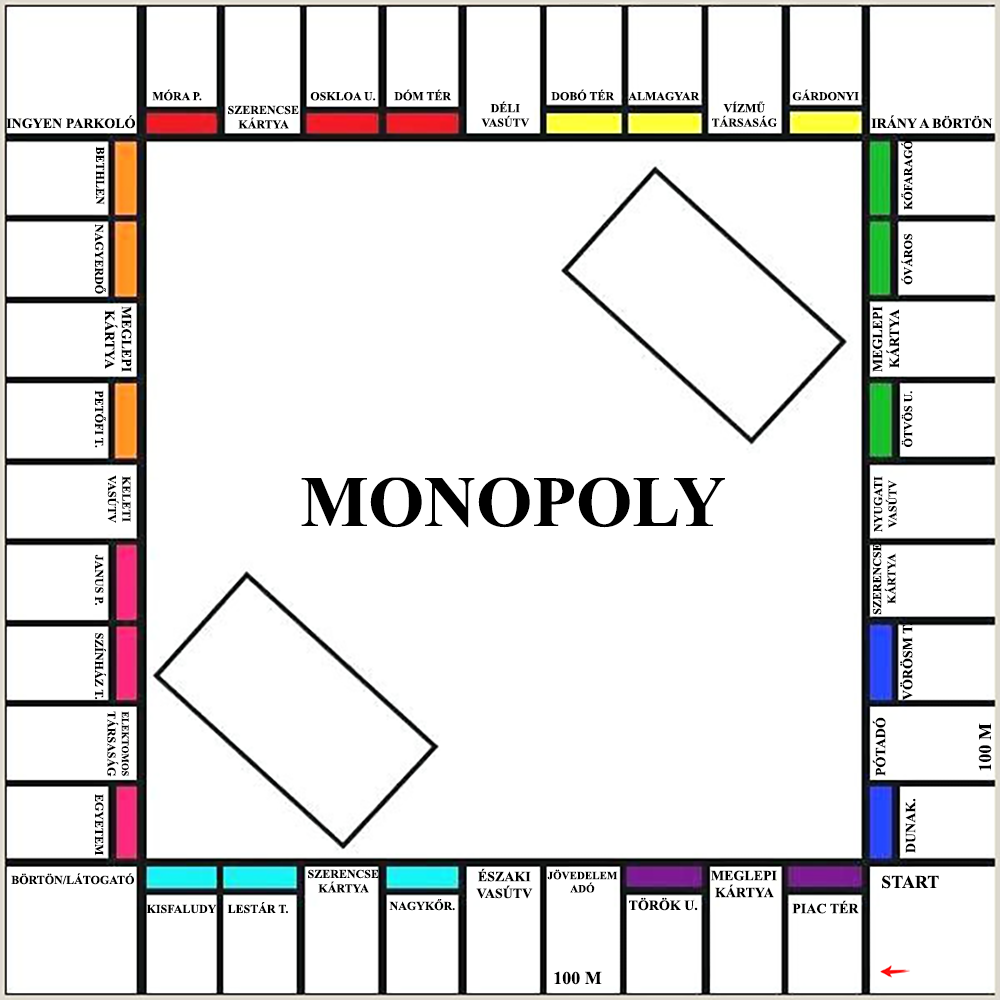
<style>
.page{position:relative;width:1000px;height:1000px;background:#ffffff}
.page>*{position:absolute;margin:0}
.t1{font:12px "TimesNewRomanPS-BoldMT";color:#000000}
.t2{font:14px "TimesNewRomanPS-BoldMT";color:#000000}
.t3{font:72px "TimesNewRomanPS-BoldMT";color:#000000}
.t4{font:10px "TimesNewRomanPS-BoldMT";color:#000000}
.t5{font:18px "TimesNewRomanPS-BoldMT";color:#000000}
.t6{font:11px "TimesNewRomanPS-BoldMT";color:#000000}
</style>
<div class="page">
<p class="t1" style="left:152px;top:89px;width:50px;height:12px">MÓRA P.</p>
<p class="t1" style="left:394px;top:89px;width:58px;height:12px">DÓM TÉR</p>
<p class="t1" style="left:551px;top:89px;width:64px;height:12px">DOBÓ TÉR</p>
<p class="t1" style="left:792px;top:89px;width:67px;height:12px">GÁRDONYI</p>
<p class="t1" style="left:310px;top:92px;width:66px;height:9px">OSKLOA U.</p>
<p class="t1" style="left:481px;top:101px;width:49px;height:26px;text-align:center">DÉLI<br>VASÚTV</p>
<p class="t1" style="left:628px;top:92px;width:72px;height:9px">ALMAGYAR</p>
<p class="t1" style="left:712px;top:101px;width:65px;height:26px;text-align:center">VÍZMŰ<br>TÁRSASÁG</p>
<p class="t1" style="left:228px;top:105px;width:71px;height:24px;text-align:center">SZERENCSE<br>KÁRTYA</p>
<p class="t2" style="left:6px;top:115px;width:129px;height:14px">INGYEN PARKOLÓ</p>
<p class="t2" style="left:871px;top:115px;width:122px;height:14px">IRÁNY A BÖRTÖN</p>
<p class="t1" style="left:96px;top:146px;width:9px;height:59px;rotate:90deg">BETHLEN</p>
<p class="t1" style="left:901px;top:140px;width:12px;height:70px;rotate:-90deg">KŐFARAGÓ</p>
<p class="t1" style="left:95px;top:224px;width:11px;height:70px;rotate:90deg">NAGYERDŐ</p>
<p class="t1" style="left:901px;top:233px;width:12px;height:52px;rotate:-90deg">ÓVÁROS</p>
<p class="t2" style="left:105px;top:306px;width:27px;height:66px;text-align:center;rotate:90deg">MEGLEPI<br>KÁRTYA</p>
<p class="t2" style="left:872px;top:306px;width:27px;height:66px;text-align:center;rotate:-90deg">MEGLEPI<br>KÁRTYA</p>
<p class="t1" style="left:95px;top:390px;width:11px;height:58px;rotate:90deg">PETŐFI T.</p>
<p class="t1" style="left:901px;top:391px;width:12px;height:56px;rotate:-90deg">ÖTVÖS U.</p>
<p class="t1" style="left:107px;top:475px;width:24px;height:48px;text-align:center;rotate:90deg">KELETI<br>VASÚTV</p>
<p class="t3" style="left:301px;top:477px;width:424px;height:51px">MONOPOLY</p>
<p class="t1" style="left:873px;top:476px;width:24px;height:56px;text-align:center;rotate:-90deg">NYUGATI<br>VASÚTV</p>
<p class="t1" style="left:872px;top:543px;width:24px;height:72px;text-align:center;rotate:-90deg">SZERENCSE<br>KÁRTYA</p>
<p class="t1" style="left:95px;top:554px;width:9px;height:52px;rotate:90deg">JANUS P.</p>
<p class="t2" style="left:900px;top:622px;width:13px;height:79px;rotate:-90deg">VÖRÖSM T.</p>
<p class="t1" style="left:95px;top:633px;width:11px;height:67px;rotate:90deg">SZÍNHÁZ T.</p>
<p class="t4" style="left:107px;top:711px;width:22px;height:66px;text-align:center;rotate:90deg">ELEKTOMOS<br><span class="t1">TÁRSASÁG</span></p>
<p class="t2" style="left:872px;top:717px;width:14px;height:59px;rotate:-90deg">PÓTADÓ</p>
<p class="t5" style="left:978px;top:723px;width:14px;height:48px;rotate:-90deg">100 M</p>
<p class="t1" style="left:95px;top:794px;width:9px;height:62px;rotate:90deg">EGYETEM</p>
<p class="t2" style="left:905px;top:798px;width:11px;height:55px;rotate:-90deg">DUNAK.</p>
<p class="t1" style="left:308px;top:869px;width:71px;height:24px;text-align:center">SZERENCSE<br>KÁRTYA</p>
<p class="t2" style="left:476px;top:868px;width:57px;height:31px;text-align:center">ÉSZAKI<br>VASÚTV</p>
<p class="t6" style="left:547px;top:869px;width:71px;height:24px;text-align:center">JÖVEDELEM<br>ADÓ</p>
<p class="t2" style="left:711px;top:870px;width:66px;height:28px;text-align:center">MEGLEPI<br>KÁRTYA</p>
<p class="t1" style="left:11px;top:873px;width:123px;height:12px">BÖRTÖN/LÁTOGATÓ</p>
<p class="t5" style="left:882px;top:875px;width:57px;height:14px">START</p>
<p class="t1" style="left:146px;top:904px;width:71px;height:10px">KISFALUDY</p>
<p class="t1" style="left:227px;top:902px;width:61px;height:12px">LESTÁR T.</p>
<p class="t1" style="left:389px;top:899px;width:66px;height:12px">NAGYKŐR.</p>
<p class="t2" style="left:629px;top:897px;width:69px;height:14px">TÖRÖK U.</p>
<p class="t2" style="left:792px;top:900px;width:67px;height:14px">PIAC TÉR</p>
<p class="t5" style="left:554px;top:971px;width:48px;height:14px">100 M</p>
</div>
